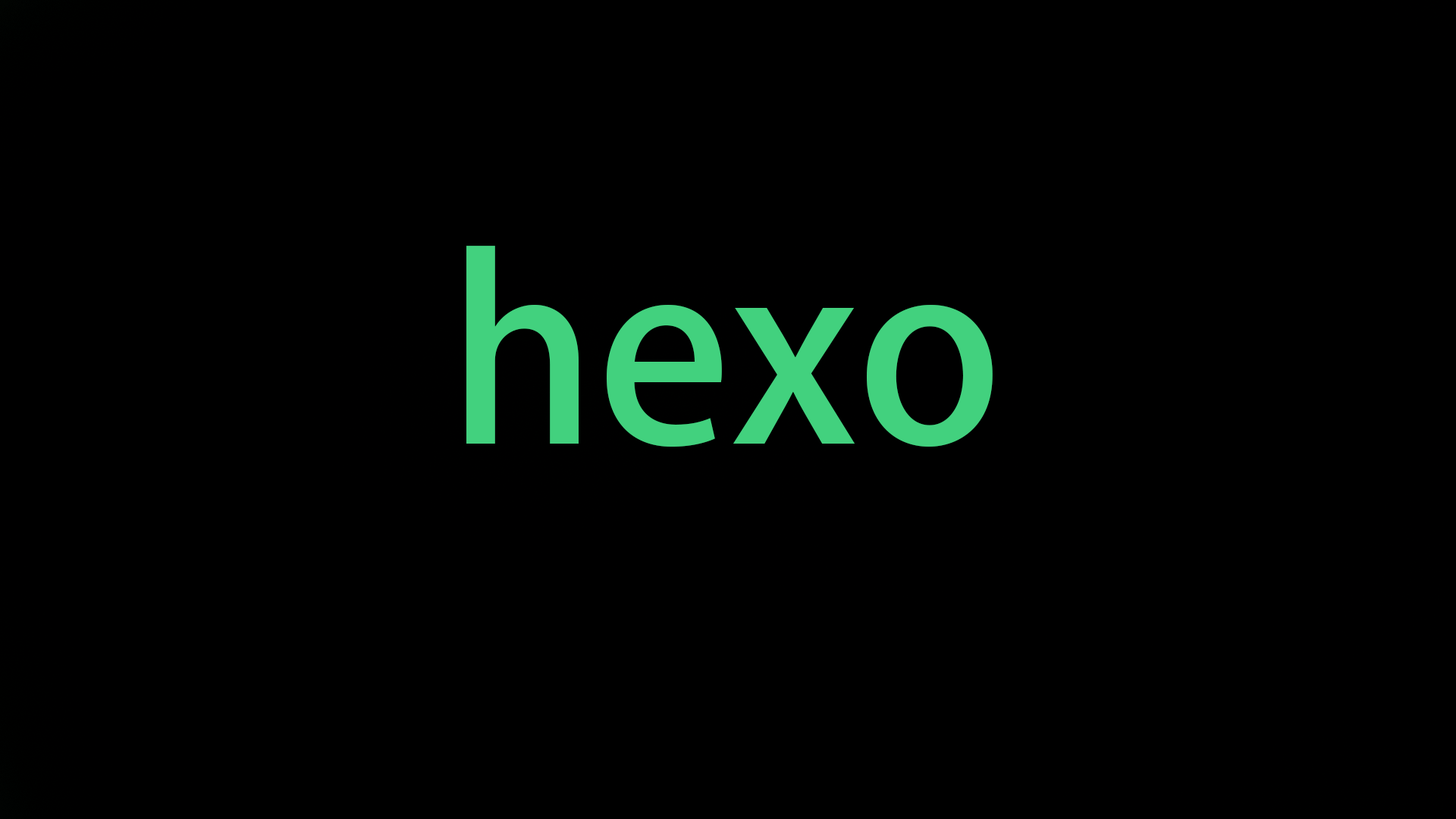
<style>
.page{position:relative;width:1456px;height:819px;background:#000000}
.page>*{position:absolute;margin:0}
.t1{font:247px "AdobeHeitiStd-Regular";color:#42d17e}
</style>
<div class="page">
<p class="t1" style="left:466px;top:246px;width:527px;height:201px">hexo</p>
</div>
